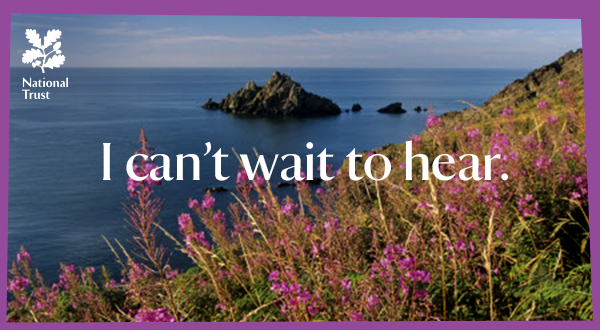
<style>
.page{position:relative;width:600px;height:330px}
.page>*{position:absolute;margin:0}
.t1{font:54px "NationalTrustDisplayTT-Regular";color:#ffffff}
</style>
<div class="page">
<p class="t1" style="left:103px;top:140px;width:405px;height:41px">I can’t wait to hear.</p>
</div>
